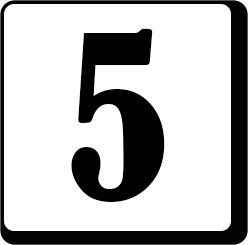
<style>
.page{position:relative;width:248px;height:245px;background:#ffffff}
.page>*{position:absolute;margin:0}
.t1{font:216px "BernardMT-Condensed";color:#010000}
</style>
<div class="page">
<p class="t1" style="left:71px;top:28px;width:94px;height:174px">5</p>
</div>
